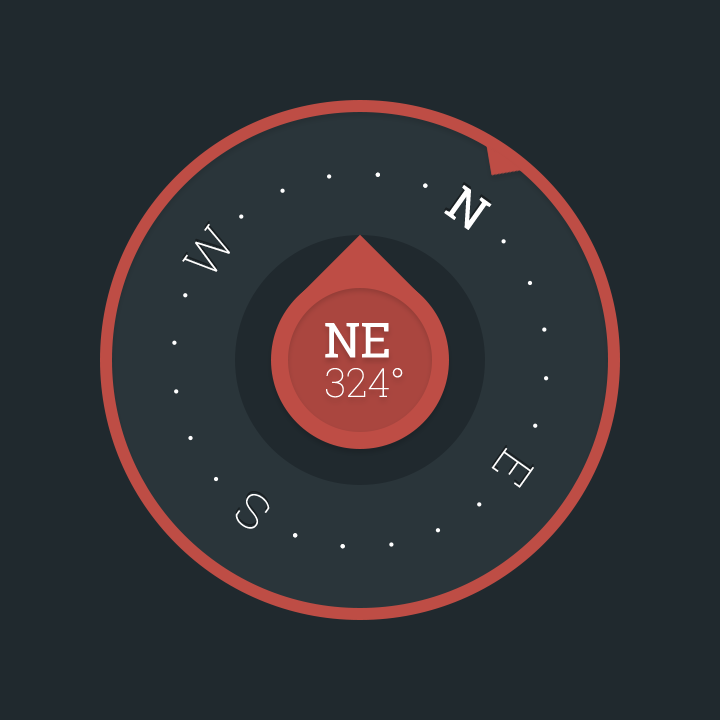
<style>
.page{position:relative;width:720px;height:720px;background:#20292e}
.page>*{position:absolute;margin:0}
.t1{font:47.9px "RobotoSlab-Regular";color:#ffffff}
.t2{font:47.6px "RobotoSlab-Thin";color:#ffffff}
.t3{font:48px "RobotoSlab-Regular";color:#ffffff}
.t4{font:40px "RobotoSlab-Thin";color:#ffffff}
.t5{font:48px "RobotoSlab-Thin";color:#ffffff}
.t6{font:47.5px "RobotoSlab-Thin";color:#ffffff;scale:1.04 1}
</style>
<div class="page">
<p class="t1" style="left:444px;top:185px;width:48px;height:45px;rotate:35deg">N</p>
<p class="t2" style="left:182px;top:224px;width:48px;height:48px;rotate:-55deg">W</p>
<p class="t3" style="left:325px;top:323px;width:64px;height:35px">NE</p>
<p class="t4" style="left:326px;top:368px;width:77px;height:30px">324°</p>
<p class="t5" style="left:491px;top:448px;width:43px;height:40px;rotate:125deg">E</p>
<p class="t6" style="left:235px;top:494px;width:35px;height:35px;rotate:-145deg">S</p>
</div>
